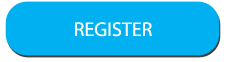
<style>
.page{position:relative;width:226px;height:62px;background:#00b0f0}
.page>*{position:absolute;margin:0}
.t1{font:20px "MyriadPro-Regular";color:#ffffff}
</style>
<div class="page">
<p class="t1" style="left:75px;top:22px;width:77px;height:15px">REGISTER</p>
</div>
